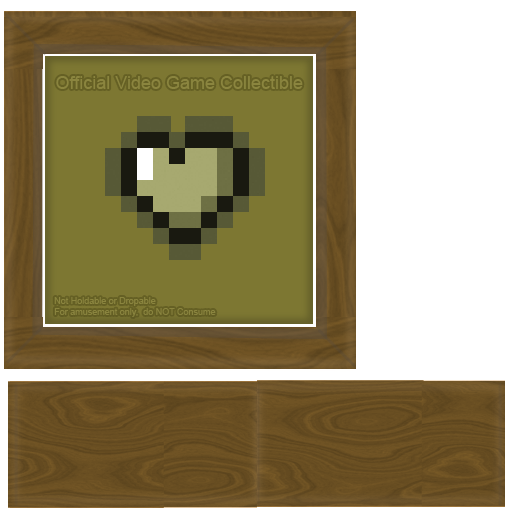
<style>
.page{position:relative;width:512px;height:512px;background:#ffffff}
.page>*{position:absolute;margin:0}
.t1{font:18px "ArialMT";color:#8b853f}
.t2{font:9px "ArialMT";color:#8b853f}
</style>
<div class="page">
<p class="t1" style="left:56px;top:76px;width:247px;height:13px">Official Video Game Collectible</p>
<p class="t2" style="left:54px;top:297px;width:162px;height:20px">Not Holdable or Dropable<br>For amusement only,  do NOT Consume</p>
</div>
